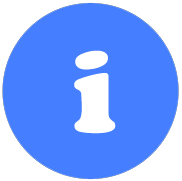
<style>
.page{position:relative;width:182px;height:181px;background:#457eff}
.page>*{position:absolute;margin:0}
.t1{font:121.6px "CooperBlack";color:#ffffff}
</style>
<div class="page">
<p class="t1" style="left:74px;top:50px;width:42px;height:84px">i</p>
</div>
